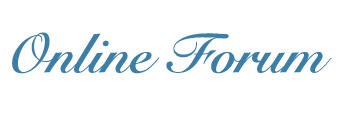
<style>
.page{position:relative;width:342px;height:114px;background:#ffffff}
.page>*{position:absolute;margin:0}
.t1{font:55px "SnellRoundhand-Bold";color:#3d7ea6}
</style>
<div class="page">
<p class="t1" style="left:12px;top:32px;width:320px;height:42px">Online Forum</p>
</div>
